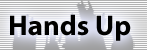
<style>
.page{position:relative;width:147px;height:50px}
.page>*{position:absolute;margin:0}
.t1{font:28.6px "MyriadPro-Bold";color:#000000}
</style>
<div class="page">
<p class="t1" style="left:10px;top:14px;width:121px;height:27px">Hands Up</p>
</div>
